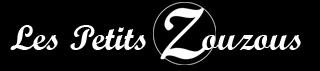
<style>
.page{position:relative;width:320px;height:71px;background:#000000}
.page>*{position:absolute;margin:0}
.t1{font:36px "ScriptMTBold";color:#ffffff}
</style>
<div class="page">
<p class="t1" style="left:10px;top:25px;width:291px;height:25px">Les Petits      ouzous</p>
</div>
